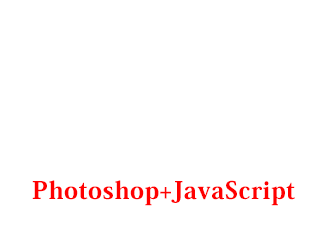
<style>
.page{position:relative;width:320px;height:240px;background:#ffffff}
.page>*{position:absolute;margin:0}
.t1{font:24px "KozMinPr6N-Heavy";letter-spacing:0.02em;color:#ff0000}
</style>
<div class="page">
<p class="t1" style="left:32px;top:180px;width:263px;height:26px">Photoshop+JavaScript</p>
</div>
